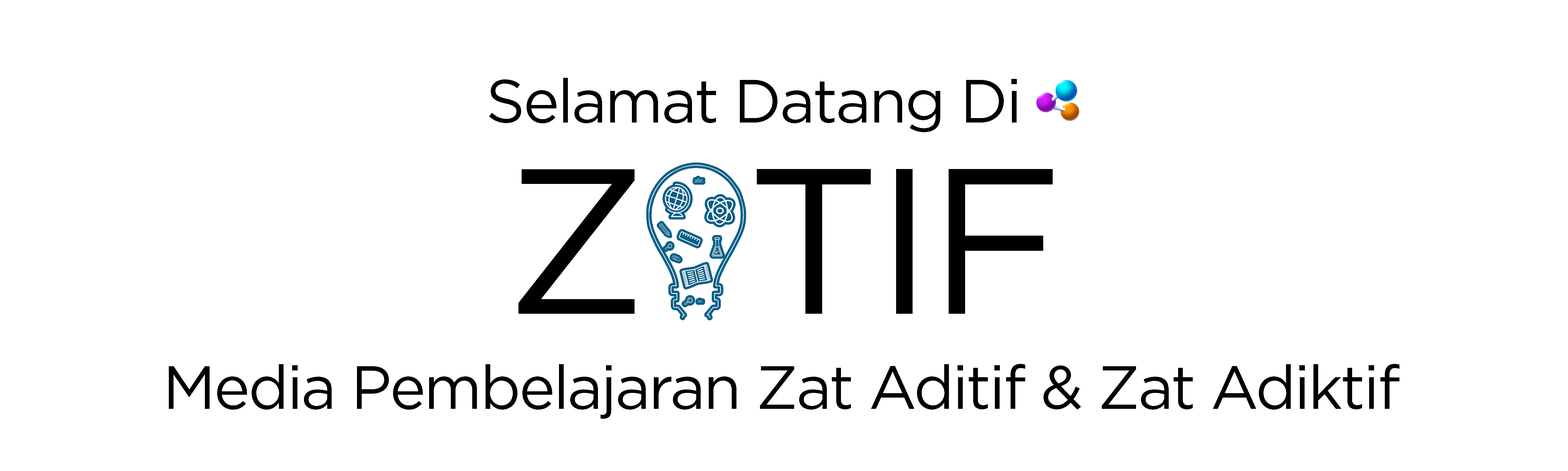
<style>
.page{position:relative;width:1568px;height:471px;background:#ffffff}
.page>*{position:absolute;margin:0}
.t1{font:61px "Gotham-Book";letter-spacing:-0.03em;color:#000000}
.t2{font:206.4px "Gotham-Book";letter-spacing:-0.03em;color:#000000}
</style>
<div class="page">
<p class="t1" style="left:489px;top:78px;width:528px;height:54px">Selamat Datang Di</p>
<p class="t2" style="left:518px;top:169px;width:117px;height:145px">Z</p>
<p class="t2" style="left:757px;top:169px;width:296px;height:145px">TIF</p>
<p class="t1" style="left:169px;top:364px;width:1230px;height:55px">Media Pembelajaran Zat Aditif &amp; Zat Adiktif</p>
</div>
